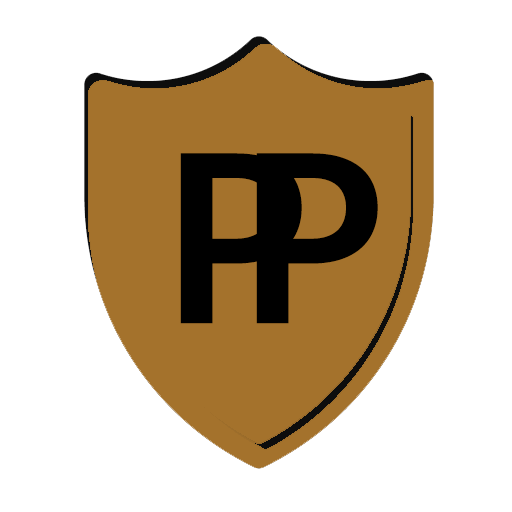
<style>
.page{position:relative;width:512px;height:512px;background:#ffffff}
.page>*{position:absolute;margin:0}
.t1{font:234.6px "Lato-Bold";color:#000000}
</style>
<div class="page">
<p class="t1" style="left:180px;top:153px;width:122px;height:171px">P</p>
<p class="t1" style="left:256px;top:153px;width:122px;height:171px">P</p>
</div>
